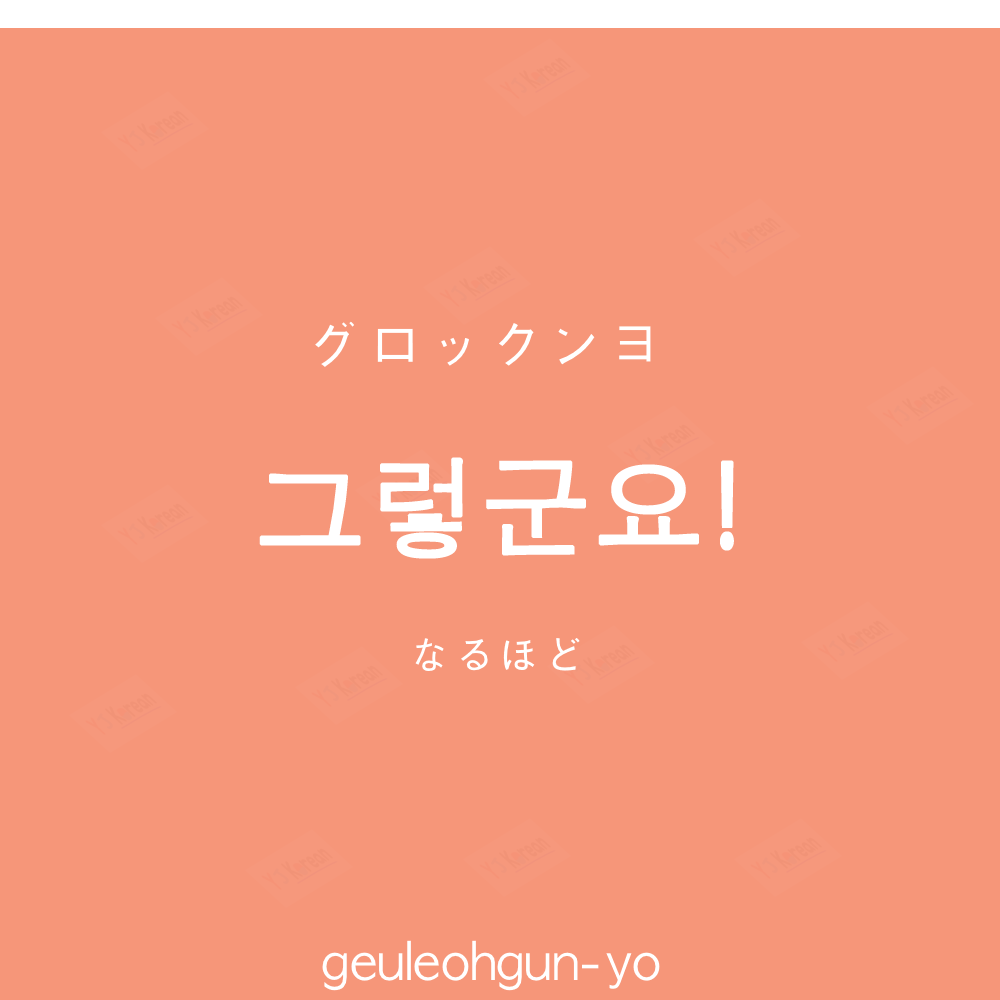
<style>
.page{position:relative;width:1000px;height:1000px;background:#f69679}
.page>*{position:absolute;margin:0}
.t1{font:60px "AppleGothic";color:#ffffff}
.t2{font:110px "AppleGothic";color:#ffffff;font-weight:bold}
.t3{font:45px "AppleGothic";color:#ffffff}
.t4{font:50px "AppleGothic";color:#ffffff}
</style>
<div class="page">
<p class="t1" style="left:315px;top:321px;width:336px;height:46px">グロックンヨ</p>
<p class="t2" style="left:259px;top:457px;width:475px;height:102px">그렇군요!</p>
<p class="t3" style="left:415px;top:638px;width:165px;height:33px">なるほど</p>
<p class="t4" style="left:322px;top:940px;width:338px;height:51px">geuleohgun-yo</p>
</div>
